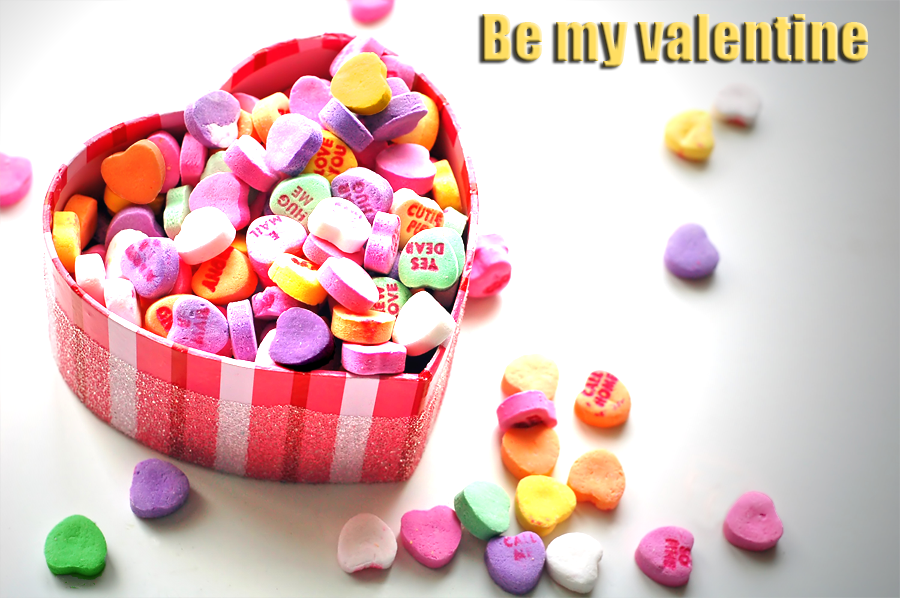
<style>
.page{position:relative;width:900px;height:598px;background:#ffffff}
.page>*{position:absolute;margin:0}
.t1{font:60px "Impact"}
</style>
<div class="page">
<p class="t1" style="left:482px;top:14px;width:386px;height:53px">Be my valentine</p>
</div>
